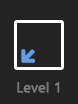
<style>
.page{position:relative;width:78px;height:104px;background:#232323}
.page>*{position:absolute;margin:0}
.t1{font:14px "SegoeUI";color:#7c7c7c;font-weight:bold}
</style>
<div class="page">
<p class="t1" style="left:17px;top:82px;width:43px;height:11px">Level 1</p>
</div>
